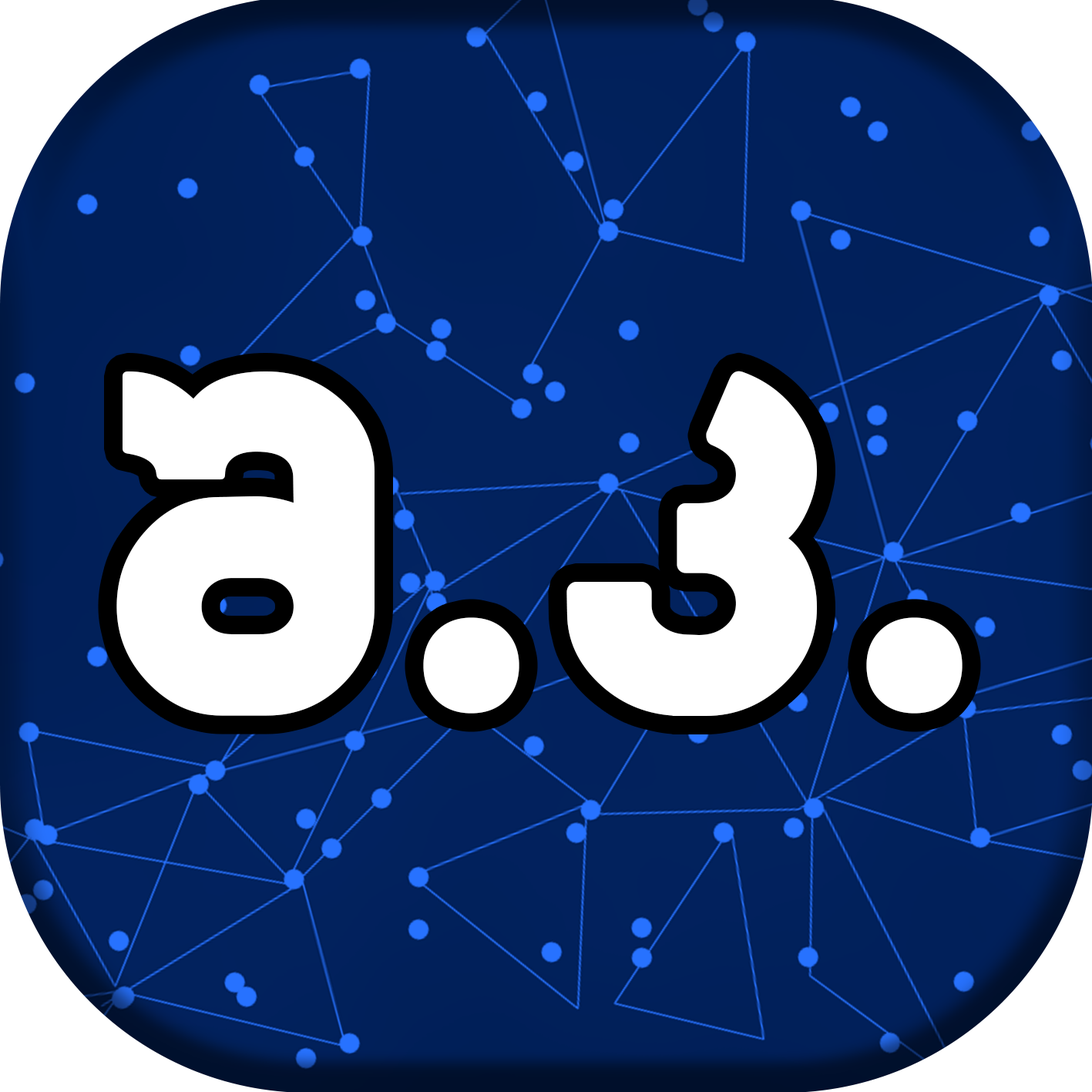
<style>
.page{position:relative;width:1092px;height:1092px}
.page>*{position:absolute;margin:0}
.t1{font:363.7px "DachiTheLynx-Regular";letter-spacing:0.02em;color:#ffffff}
</style>
<div class="page">
<p class="t1" style="left:116px;top:371px;width:847px;height:345px">შ.კ.</p>
</div>
